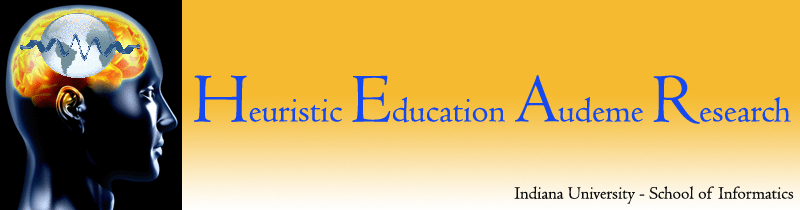
<style>
.page{position:relative;width:800px;height:210px;background:#f5ba2f}
.page>*{position:absolute;margin:0}
.t1{font:36px "Centaur";color:#1548ee}
.t2{font:36px "CalifornianFB-Bold";color:#6889f3}
.t3{font:72px "Centaur";color:#1548ee}
.t4{font:18px "Centaur";color:#0c0c0c}
.t5{font:14px "Centaur";color:#6889f3}
</style>
<div class="page">
<p class="t1" style="left:194px;top:75px;width:597px;height:49px"><span class="t2"><br></span><span class="t3">H</span>euristic <span class="t3">E</span>ducation <span class="t3">A</span>udeme <span class="t3">R</span>esearch</p>
<p class="t4" style="left:514px;top:186px;width:280px;height:18px"><span class="t5"><br>                                             </span>Indiana University - School of Informatics</p>
</div>
